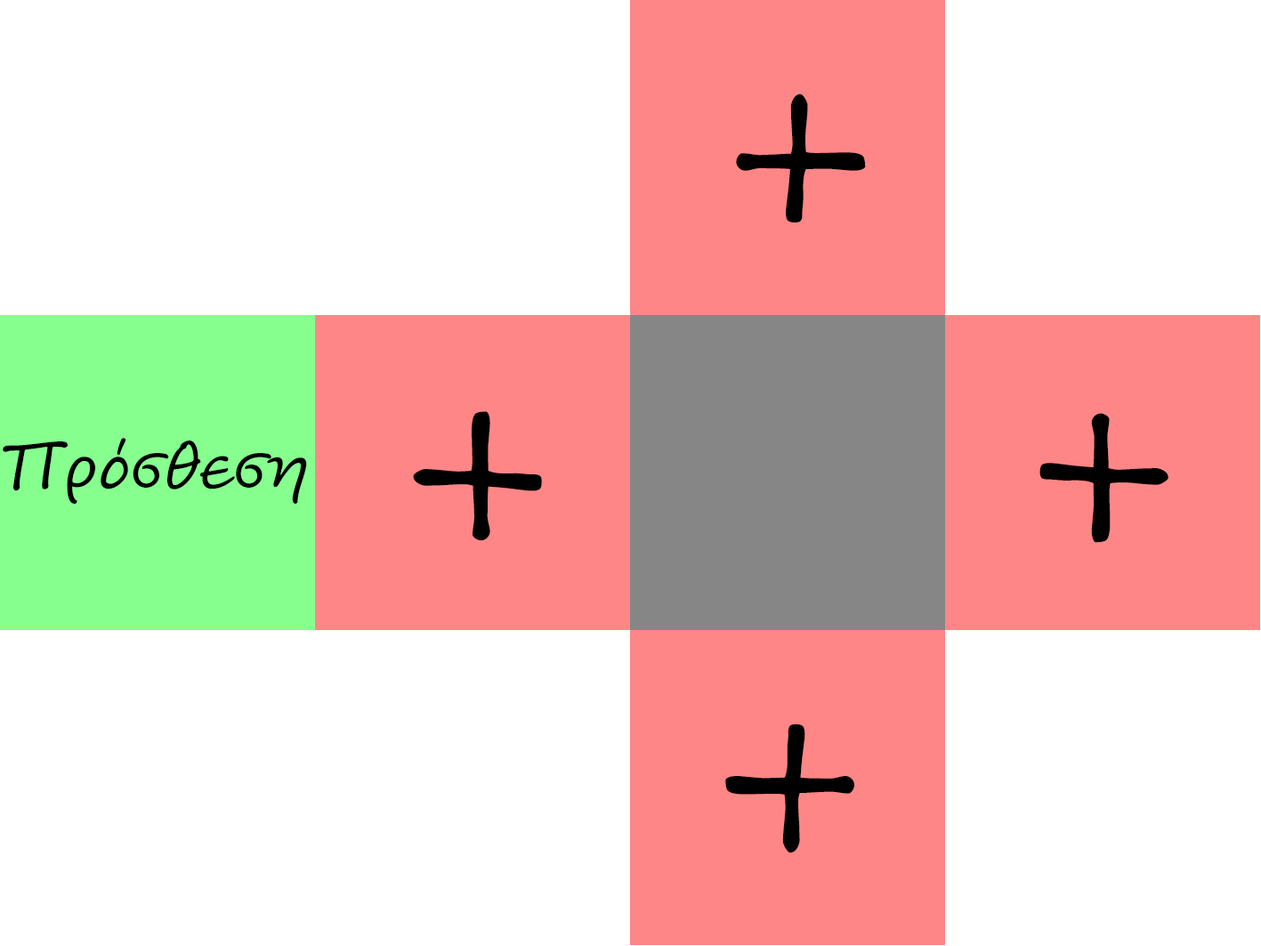
<style>
.page{position:relative;width:1261px;height:946px;background:#ffffff}
.page>*{position:absolute;margin:0}
.t1{font:266.9px "SegoeScript";color:#000000}
.t2{font:63px "SegoeScript";color:#000000}
</style>
<div class="page">
<p class="t1" style="left:736px;top:93px;width:130px;height:129px">+</p>
<p class="t1" style="left:413px;top:411px;width:129px;height:130px;rotate:-90deg">+</p>
<p class="t1" style="left:1039px;top:413px;width:129px;height:130px;rotate:90deg">+</p>
<p class="t2" style="left:3px;top:438px;width:304px;height:66px">Πρόσθεση</p>
<p class="t1" style="left:725px;top:723px;width:129px;height:129px;rotate:-180deg">+</p>
</div>
